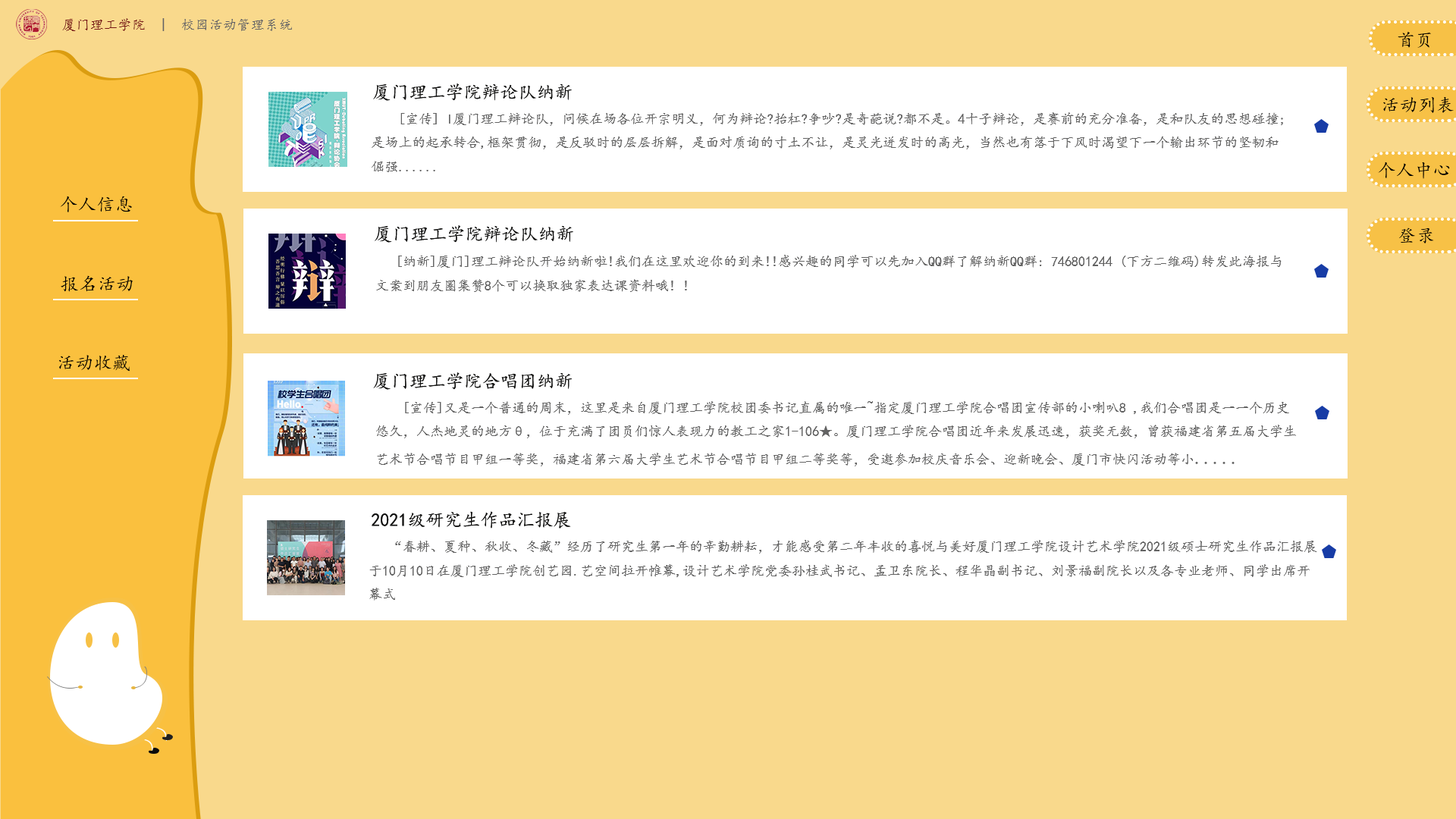
<style>
.page{position:relative;width:1456px;height:819px;background:#ffffff}
.page>*{position:absolute;margin:0}
.t1{font:13.6px "KaiTi";letter-spacing:0.02em;color:#626266}
.t2{font:13.6px "KaiTi";letter-spacing:0.02em;color:#771515}
.t3{font:18.2px "KaiTi";letter-spacing:0.02em;color:#000000}
.t4{font:18.2px "KaiTi";color:#10100f}
.t5{font:18.2px "KaiTi";letter-spacing:0.02em;color:#010101}
.t6{font:13.6px "KaiTi";color:#636363}
.t7{font:18.2px "KaiTi";color:#636363}
</style>
<div class="page">
<p class="t1" style="left:62px;top:18px;width:230px;height:13px"><span class="t2">厦门理工学院</span>  |  校园活动管理系统</p>
<p class="t3" style="left:1398px;top:32px;width:33px;height:16px">首页</p>
<p class="t4" style="left:373px;top:83px;width:199px;height:18px">厦门理工学院辩论队纳新</p>
<p class="t5" style="left:1383px;top:97px;width:71px;height:16px">活动列表</p>
<p class="t6" style="left:372px;top:112px;width:911px;height:60px">[宣传] I厦门理工辩论队，问候在场各位开宗明义，何为辩论?抬杠?争吵?是奇葩说?都不是。4十子辩论，是赛前的充分准备，是和队友的思想碰撞;<br>是场上的起承转合,框架贯彻，是反驳时的层层拆解，是面对质询的寸土不让，是灵光迸发时的高光，当然也有落于下风时渴望下一个输出环节的坚韧和<br>倔强......</p>
<p class="t5" style="left:1378px;top:162px;width:72px;height:17px">个人中心</p>
<p class="t5" style="left:60px;top:196px;width:72px;height:16px">个人信息</p>
<p class="t4" style="left:375px;top:225px;width:198px;height:18px">厦门理工学院辩论队纳新</p>
<p class="t5" style="left:1399px;top:227px;width:35px;height:16px">登录</p>
<p class="t6" style="left:376px;top:255px;width:906px;height:37px">[纳新]厦门]理工辩论队开始纳新啦!我们在这里欢迎你的到来!!感兴趣的同学可以先加入QQ群了解纳新QQ群: 746801244 (下方二维码)转发此海报与<br>文案到朋友圈集赞8个可以换取独家表达课资料哦! !</p>
<p class="t5" style="left:61px;top:275px;width:72px;height:17px">报名活动</p>
<p class="t5" style="left:58px;top:355px;width:72px;height:17px">活动收藏</p>
<p class="t4" style="left:373px;top:372px;width:200px;height:18px">厦门理工学院合唱团纳新</p>
<p class="t6" style="left:376px;top:401px;width:920px;height:65px">[宣传]又是一个普通的周末，这里是来自厦门理工学院校团委书记直属的唯一~指定厦门理工学院合唱团宣传部的小喇叭8 ,我们合唱团是一一个历史<br>悠久，人杰地灵的地方θ，位于充满了团员们惊人表现力的教工之家1-106★。厦门理工学院合唱团近年来发展迅速，获奖无数，曾获福建省第五届大学生<br>艺术节合唱节目甲组一等奖，福建省第六届大学生艺术节合唱节目甲组二等奖等，受邀参加校庆音乐会、迎新晚会、厦门市快闪活动等小<span class="t7">.....</span></p>
<p class="t4" style="left:372px;top:511px;width:199px;height:18px">2021级研究生作品汇报展</p>
<p class="t6" style="left:369px;top:540px;width:948px;height:61px">“春耕、夏种、秋收、冬藏”经历了研究生第一年的辛勤耕耘，才能感受第二年丰收的喜悦与美好厦门理工学院设计艺术学院2021级硕士研究生作品汇报展<br>于10月10日在厦门理工学院创艺园.艺空间拉开帷幕,设计艺术学院党委孙桂武书记、孟卫东院长、程华晶副书记、刘景福副院长以及各专业老师、同学出席开<br>幕式</p>
</div>
